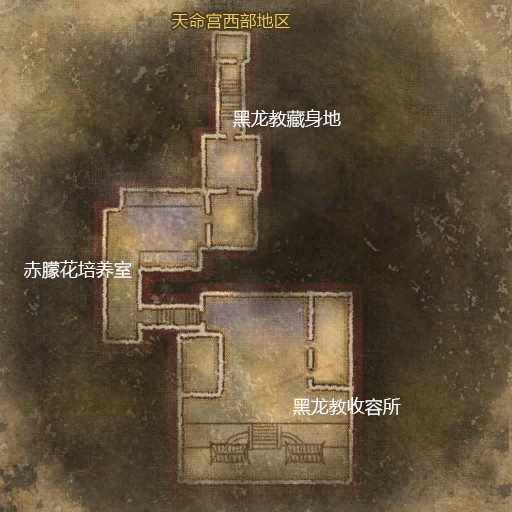
<style>
.page{position:relative;width:512px;height:512px}
.page>*{position:absolute;margin:0}
.t1{font:18px "MicrosoftYaHei";color:#ffffff}
</style>
<div class="page">
<p class="t1" style="left:233px;top:109px;width:108px;height:19px">黑龙教藏身地</p>
<p class="t1" style="left:24px;top:260px;width:108px;height:19px">赤朦花培养室</p>
<p class="t1" style="left:293px;top:397px;width:108px;height:19px">黑龙教收容所</p>
</div>
